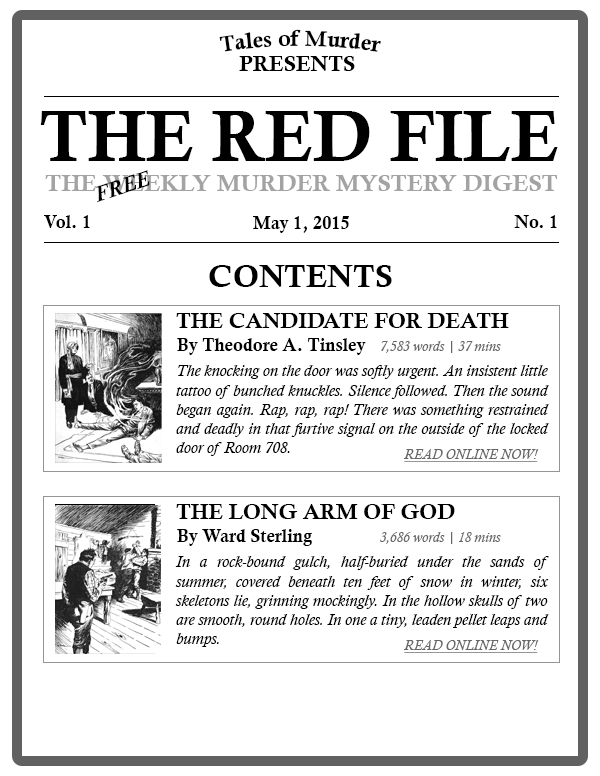
<style>
.page{position:relative;width:600px;height:776px;background:#ffffff}
.page>*{position:absolute;margin:0}
.t1{font:22px "CalisMTBol";color:#000000}
.t2{font:72px "CalisMTBol";color:#000000;text-transform:uppercase}
.t3{font:22px "CalistoMT-BoldItalic";color:#000000;text-transform:uppercase}
.t4{font:24px "CalisMTBol";color:#a3a3a3;text-transform:uppercase}
.t5{font:18px "CalisMTBol";color:#000000}
.t6{font:32px "CalisMTBol";color:#000000}
.t7{font:14px "CalistoMT-Italic";color:#676767}
.t8{font:16px "CalistoMT-Italic";color:#000000}
.t9{font:14px "CalistoMT-Italic";color:#676767;text-decoration:underline}
</style>
<div class="page">
<p class="t1" style="left:219px;top:29px;width:162px;height:23px">Tales of Murder</p>
<p class="t1" style="left:219px;top:29px;width:162px;height:23px">Tales of Murder</p>
<p class="t1" style="left:239px;top:56px;width:116px;height:15px">PRESENTS</p>
<p class="t1" style="left:239px;top:56px;width:116px;height:15px">PRESENTS</p>
<p class="t2" style="left:40px;top:111px;width:518px;height:50px">The RED File</p>
<p class="t2" style="left:40px;top:111px;width:518px;height:50px">The RED File</p>
<p class="t3" style="left:96px;top:170px;width:54px;height:33px;rotate:-19deg">FREE</p>
<p class="t3" style="left:96px;top:170px;width:54px;height:33px;rotate:-19deg">FREE</p>
<p class="t4" style="left:45px;top:175px;width:513px;height:16px">The weekly murder mystery digest</p>
<p class="t4" style="left:45px;top:175px;width:513px;height:16px">The weekly murder mystery digest</p>
<p class="t5" style="left:44px;top:215px;width:46px;height:13px">Vol. 1</p>
<p class="t5" style="left:44px;top:215px;width:46px;height:13px">Vol. 1</p>
<p class="t5" style="left:253px;top:216px;width:96px;height:17px">May 1, 2015</p>
<p class="t5" style="left:253px;top:216px;width:96px;height:17px">May 1, 2015</p>
<p class="t5" style="left:514px;top:215px;width:43px;height:13px">No. 1</p>
<p class="t5" style="left:514px;top:215px;width:43px;height:13px">No. 1</p>
<p class="t6" style="left:209px;top:265px;width:183px;height:22px">CONTENTS</p>
<p class="t6" style="left:209px;top:265px;width:183px;height:22px">CONTENTS</p>
<p class="t1" style="left:176px;top:313px;width:333px;height:15px">THE CANDIDATE FOR DEATH</p>
<p class="t1" style="left:176px;top:313px;width:333px;height:15px">THE CANDIDATE FOR DEATH</p>
<p class="t5" style="left:177px;top:338px;width:189px;height:17px">By Theodore A. Tinsley</p>
<p class="t5" style="left:177px;top:338px;width:189px;height:17px">By Theodore A. Tinsley</p>
<p class="t7" style="left:381px;top:341px;width:120px;height:12px">7,583 words | 37 mins</p>
<p class="t7" style="left:381px;top:341px;width:120px;height:12px">7,583 words | 37 mins</p>
<p class="t8" style="left:176px;top:365px;width:373px;height:91px;text-align:justify">The knocking on the door was softly urgent. An insistent little tattoo of bunched knuckles. Silence followed. Then the sound began again. Rap, rap, rap! There was something restrained and deadly in that furtive signal on the outside of the locked door of Room 708.</p>
<p class="t8" style="left:176px;top:365px;width:373px;height:91px;text-align:justify">The knocking on the door was softly urgent. An insistent little tattoo of bunched knuckles. Silence followed. Then the sound began again. Rap, rap, rap! There was something restrained and deadly in that furtive signal on the outside of the locked door of Room 708.</p>
<p class="t9" style="left:403px;top:449px;width:136px;height:13px">READ ONLINE NOW!</p>
<p class="t9" style="left:403px;top:449px;width:136px;height:13px">READ ONLINE NOW!</p>
<p class="t1" style="left:176px;top:504px;width:279px;height:15px">THE LONG ARM OF GOD</p>
<p class="t1" style="left:176px;top:504px;width:279px;height:15px">THE LONG ARM OF GOD</p>
<p class="t5" style="left:177px;top:529px;width:135px;height:17px">By Ward Sterling</p>
<p class="t5" style="left:177px;top:529px;width:135px;height:17px">By Ward Sterling</p>
<p class="t7" style="left:379px;top:532px;width:122px;height:12px">3,686 words | 18 mins</p>
<p class="t7" style="left:379px;top:532px;width:122px;height:12px">3,686 words | 18 mins</p>
<p class="t8" style="left:175px;top:556px;width:374px;height:91px;text-align:justify">In a rock-bound gulch, half-buried under the sands of summer, covered beneath ten feet of snow in winter, six skeletons lie, grinning mockingly. In the hollow skulls of two are smooth, round holes. In one a tiny, leaden pellet leaps and bumps.</p>
<p class="t8" style="left:175px;top:556px;width:374px;height:91px;text-align:justify">In a rock-bound gulch, half-buried under the sands of summer, covered beneath ten feet of snow in winter, six skeletons lie, grinning mockingly. In the hollow skulls of two are smooth, round holes. In one a tiny, leaden pellet leaps and bumps.</p>
<p class="t9" style="left:403px;top:640px;width:136px;height:13px">READ ONLINE NOW!</p>
<p class="t9" style="left:403px;top:640px;width:136px;height:13px">READ ONLINE NOW!</p>
</div>
